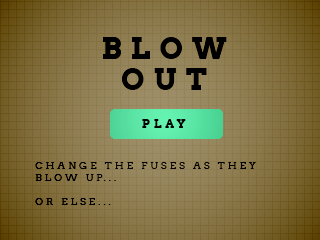
<style>
.page{position:relative;width:320px;height:240px}
.page>*{position:absolute;margin:0}
.t1{font:30px/32px "Arvo-Bold";letter-spacing:0.3em;color:#000000;text-transform:uppercase}
.t2{font:30px/31px "Arvo-Bold";letter-spacing:0.3em;color:#000000;text-transform:uppercase}
.t3{font:12px "Arvo-Bold";letter-spacing:0.3em;color:#000000;text-transform:uppercase}
.t4{font:10px "Arvo";letter-spacing:0.3em;color:#000000;text-transform:uppercase}
</style>
<div class="page">
<p class="t1" style="left:103px;top:37px;width:124px;height:53px;text-align:center">Blow<br><span class="t2">OUT</span></p>
<p class="t3" style="left:142px;top:119px;width:44px;height:9px">PLAY</p>
<p class="t4" style="left:35px;top:161px;width:221px;height:44px">Change the fuses as they blow up... <br><br>or else...</p>
</div>
